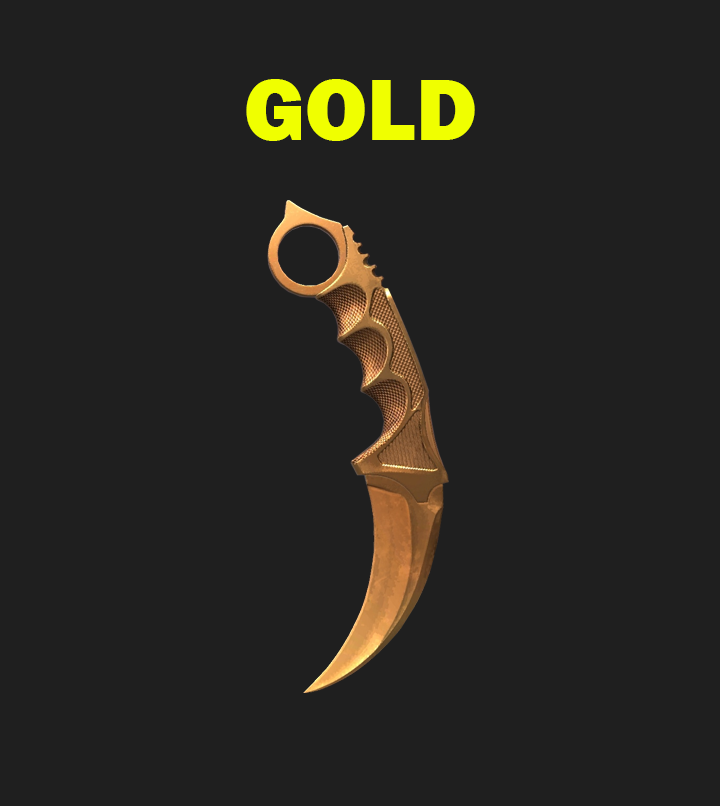
<style>
.page{position:relative;width:720px;height:806px;background:#1f1f1f}
.page>*{position:absolute;margin:0}
.t1{font:90px "FranklinGothic-Heavy";color:#f0ff00}
</style>
<div class="page">
<p class="t1" style="left:246px;top:79px;width:229px;height:62px">GOLD</p>
</div>
